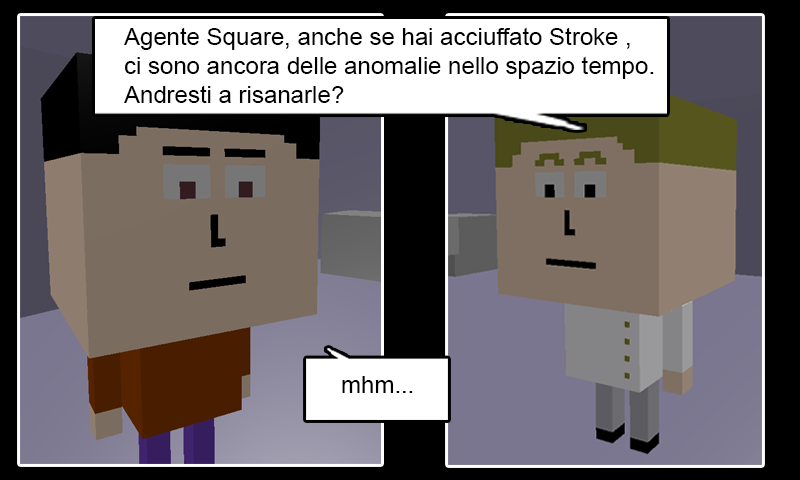
<style>
.page{position:relative;width:800px;height:480px;background:#000000}
.page>*{position:absolute;margin:0}
.t1{font:24px "ArialMT";color:#000000}
</style>
<div class="page">
<p class="t1" style="left:124px;top:27px;width:530px;height:76px">Agente Square, anche se hai acciuffato Stroke ,<br>ci sono ancora delle anomalie nello spazio tempo.<br>Andresti a risanarle?</p>
<p class="t1" style="left:342px;top:376px;width:71px;height:17px">mhm...</p>
</div>
